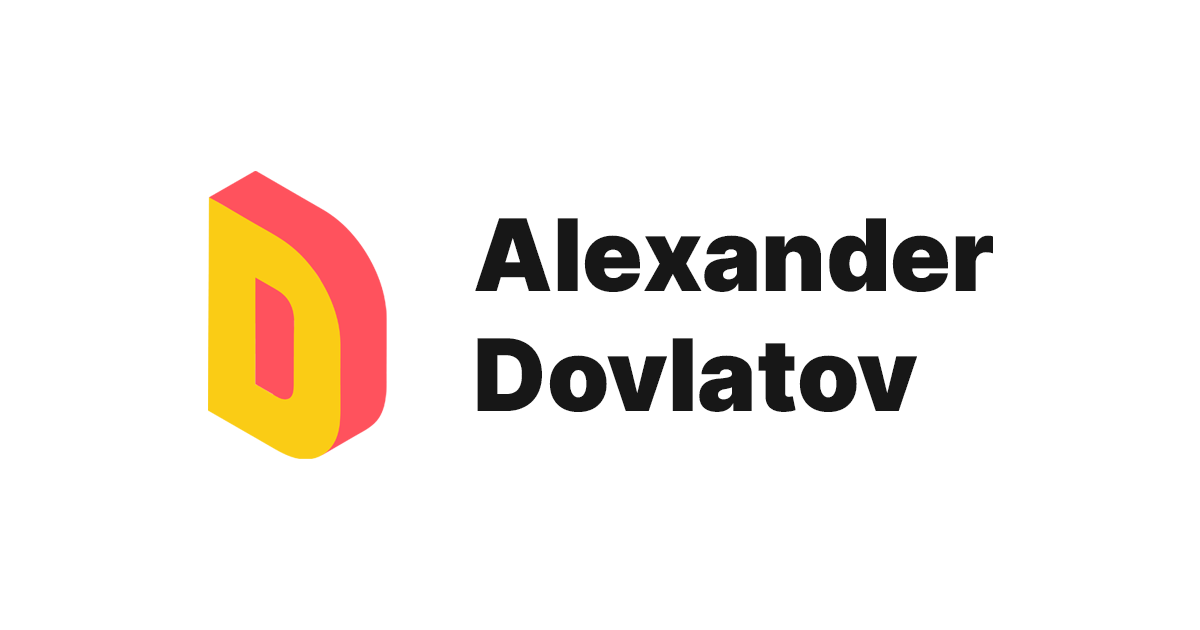
<style>
.page{position:relative;width:1200px;height:630px;background:#ffffff}
.page>*{position:absolute;margin:0}
.t1{font:100px "Inter-Black";color:#171717}
</style>
<div class="page">
<p class="t1" style="left:475px;top:218px;width:518px;height:194px">Alexander <br>Dovlatov</p>
</div>
